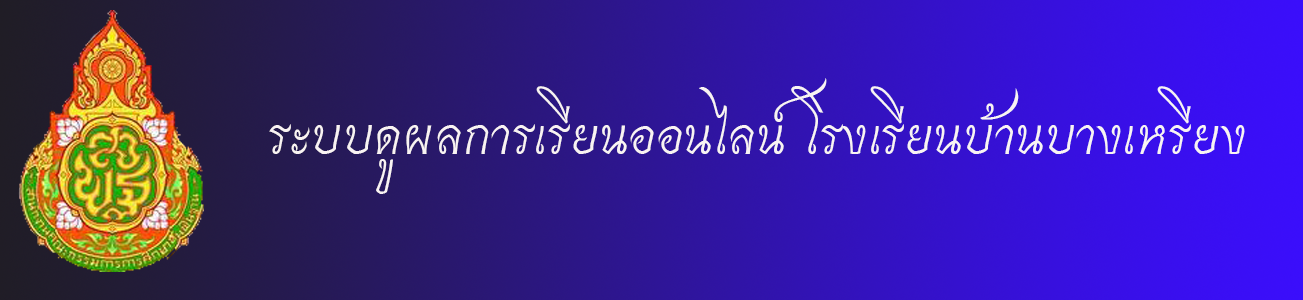
<style>
.page{position:relative;width:1303px;height:300px}
.page>*{position:absolute;margin:0}
.t1{font:72px "THCharmonman";color:#f9f3f3}
</style>
<div class="page">
<p class="t1" style="left:269px;top:78px;width:976px;height:116px">ระบบดูผลการเรียนออนไลน์ โรงเรียนบ้านบางเหรียง</p>
</div>
